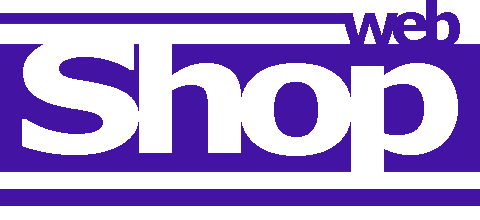
<style>
.page{position:relative;width:480px;height:220px;background:#ffffff}
.page>*{position:absolute;margin:0}
.t1{font:60px "Verdana-Bold";letter-spacing:-0.15em;color:#4314a4}
.t2{font:157.7px "Verdana-Bold";letter-spacing:-0.13em;color:#ffffff;scale:1.18 1}
</style>
<div class="page">
<p class="t1" style="left:341px;top:0px;width:119px;height:47px">web</p>
<p class="t2" style="left:22px;top:33px;width:436px;height:152px">Shop</p>
</div>
